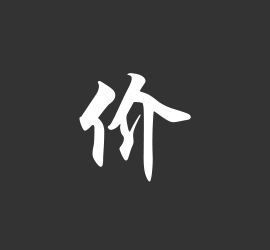
<style>
.page{position:relative;width:270px;height:250px;background:#333333}
.page>*{position:absolute;margin:0}
.t1{font:128px "STXingkai";color:#ffffff}
</style>
<div class="page">
<p class="t1" style="left:79px;top:73px;width:112px;height:109px">价</p>
</div>
